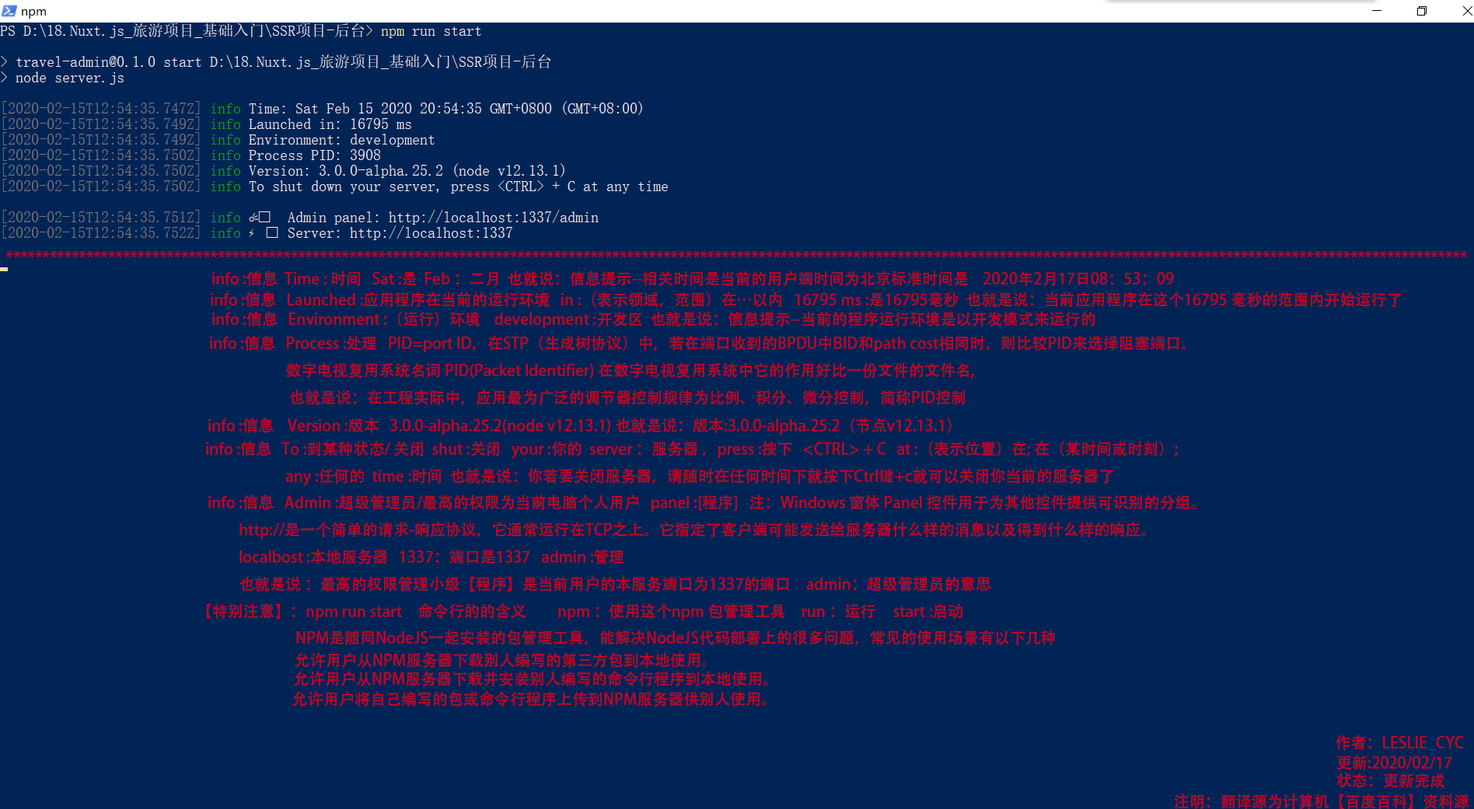
<style>
.page{position:relative;width:1474px;height:809px;background:#012456}
.page>*{position:absolute;margin:0}
.t1{font:9.3px "AdobeHeitiStd-Regular";color:#c6021e}
</style>
<div class="page">
<p class="t1" style="left:6px;top:251px;width:1461px;height:7px">********************************************************************************************************************************************************************************************************</p>
<p class="t1" style="left:212px;top:270px;width:962px;height:17px">info :信息  Time : 时间   Sat :是  Feb ：二月  也就说：信息提示--相关时间是当前的用户端时间为北京标准时间是    2020年2月17日08：53：09</p>
<p class="t1" style="left:211px;top:291px;width:1190px;height:17px">info :信息   Launched :应用程序在当前的运行环境   in :（表示领域，范围）在…以内   16795 ms :是16795毫秒  也就是说：当前应用程序在这个16795 毫秒的范围内开始运行了</p>
<p class="t1" style="left:212px;top:311px;width:883px;height:18px">info :信息   Environment :（运行）环境    development :开发区  也就是说：信息提示--当前的程序运行环境是以开发模式来运行的</p>
<p class="t1" style="left:210px;top:335px;width:975px;height:71px">info :信息   Process :处理   PID=port ID，在STP（生成树协议）中，若在端口收到的BPDU中BID和path cost相同时，则比较PID来选择阻塞端口。<br>                      数字电视复用系统名词 PID(Packet Identifier) 在数字电视复用系统中它的作用好比一份文件的文件名, <br>                       也就是说：在工程实际中，应用最为广泛的调节器控制规律为比例、积分、微分控制，简称PID控制</p>
<p class="t1" style="left:208px;top:417px;width:743px;height:18px">info :信息    Version :版本   3.0.0-alpha.25.2(node v12.13.1) 也就是说：版本:3.0.0-alpha.25.2（节点v12.13.1）</p>
<p class="t1" style="left:206px;top:441px;width:972px;height:45px">info :信息   To :到某种状态/ 关闭  shut :关闭   your :你的  server ：服务器 ，press :按下   &lt;CTRL&gt; + C   at :（表示位置）在; 在（某时间或时刻）;<br>                       any :任何的  time :时间  也就是说：你若要关闭服务器，请随时在任何时间下就按下Ctrl键+c就可以关闭你当前的服务器了</p>
<p class="t1" style="left:208px;top:494px;width:987px;height:98px">info :信息   Admin :超级管理员/最高的权限为当前电脑个人用户   panel :[程序]   注：Windows 窗体 Panel 控件用于为其他控件提供可识别的分组。<br>         http://是一个简单的请求-响应协议，它通常运行在TCP之上。它指定了客户端可能发送给服务器什么样的消息以及得到什么样的响应。<br>         localbost :本地服务器   1337：端口是1337   admin :管理  <br>         也就是说 ：最高的权限管理小级【程序】是当前用户的本服务端口为1337的端口　admin：超级管理员的意思</p>
<p class="t1" style="left:207px;top:603px;width:756px;height:18px">【特别注意】：npm run start　命令行的的含义　　npm ：使用这个npm 包管理工具　run ：运行     start :启动</p>
<p class="t1" style="left:296px;top:630px;width:759px;height:15px">NPM是随同NodeJS一起安装的包管理工具，能解决NodeJS代码部署上的很多问题，常见的使用场景有以下几种</p>
<p class="t1" style="left:295px;top:652px;width:411px;height:16px">允许用户从NPM服务器下载别人编写的第三方包到本地使用。</p>
<p class="t1" style="left:294px;top:671px;width:473px;height:16px">允许用户从NPM服务器下载并安装别人编写的命令行程序到本地使用。</p>
<p class="t1" style="left:292px;top:691px;width:474px;height:16px">允许用户将自己编写的包或命令行程序上传到NPM服务器供别人使用。</p>
<p class="t1" style="left:1335px;top:735px;width:129px;height:15px">作者：LESLIE_CYC</p>
<p class="t1" style="left:1337px;top:756px;width:114px;height:14px">更新:2020/02/17</p>
<p class="t1" style="left:1336px;top:773px;width:108px;height:15px">状态：更新完成</p>
<p class="t1" style="left:1174px;top:794px;width:295px;height:16px">注明：翻译源为计算机【百度百科】资料源</p>
</div>
